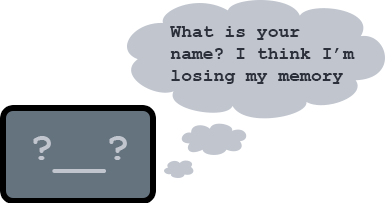
<style>
.page{position:relative;width:385px;height:203px;background:#ffffff}
.page>*{position:absolute;margin:0}
.t1{font:18px "CourierNewPS-BoldMT";color:#2b303b}
.t2{font:42.2px "CourierNewPS-BoldMT";color:#c0c5ce}
</style>
<div class="page">
<p class="t1" style="left:170px;top:26px;width:185px;height:58px">What is your<br>name? I think I’m<br>losing my memory</p>
<p class="t2" style="left:33px;top:136px;width:94px;height:37px">?__?</p>
</div>
